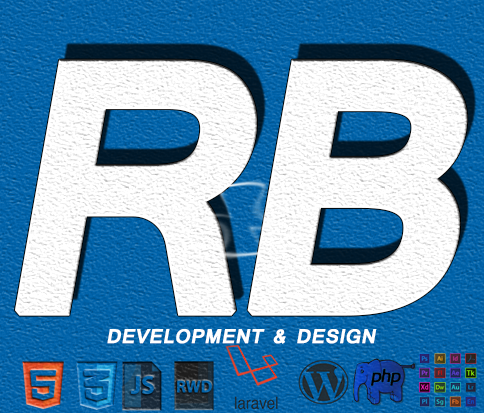
<style>
.page{position:relative;width:484px;height:413px}
.page>*{position:absolute;margin:0}
.t1{font:333.4px "Mangal-Bold";letter-spacing:-0.1em;color:#ffffff;font-weight:bold;font-style:italic}
.t2{font:18.7px "Mangal-Bold";color:#ffffff;font-weight:bold;font-style:italic}
</style>
<div class="page">
<p class="t1" style="left:15px;top:59px;width:453px;height:257px">RB</p>
<p class="t2" style="left:107px;top:329px;width:270px;height:15px">DEVELOPMENT &amp; DESIGN</p>
</div>
